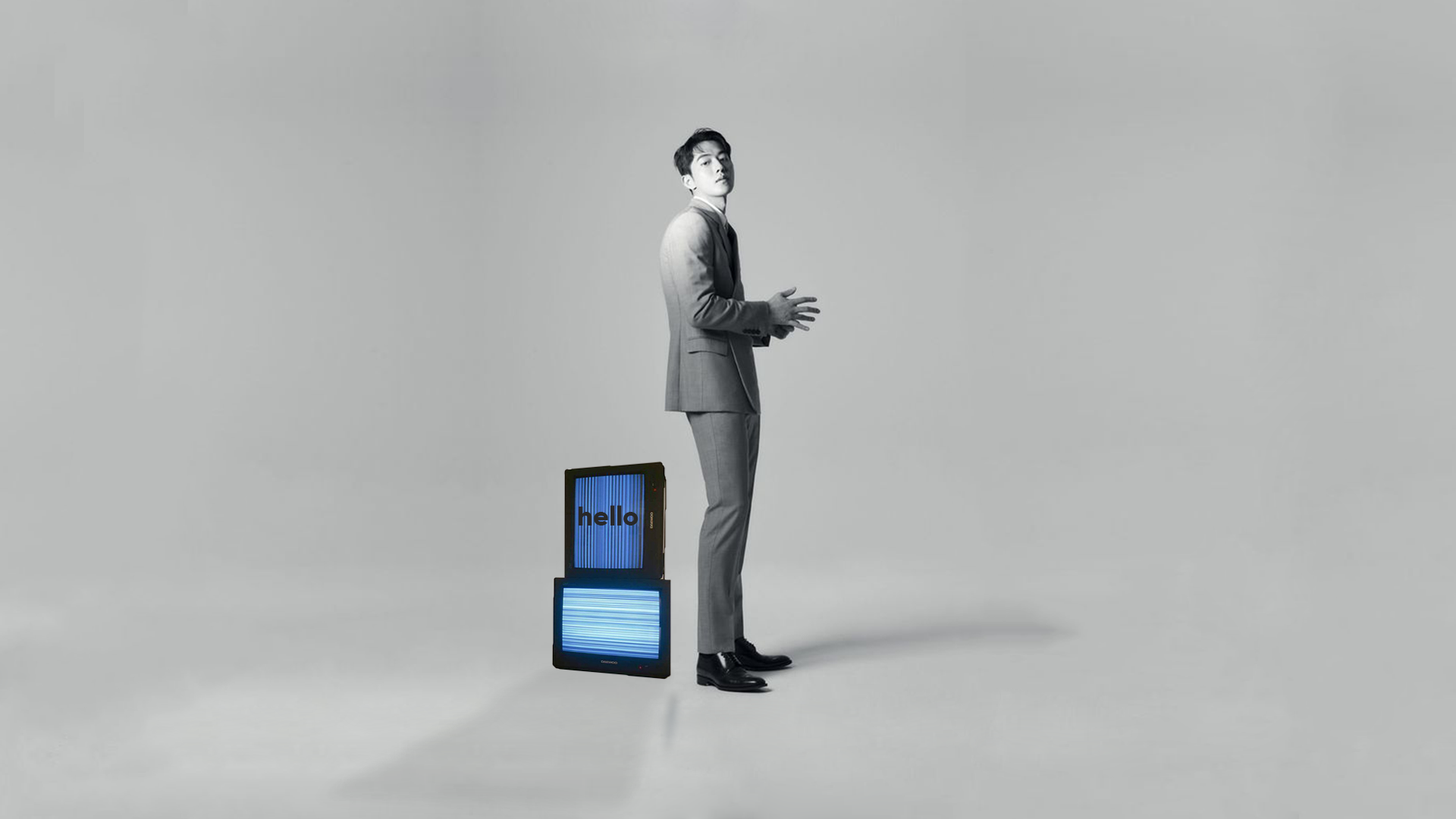
<style>
.page{position:relative;width:1456px;height:819px;background:#babcbb}
.page>*{position:absolute;margin:0}
.t1{font:27.1px "Gilroy-ExtraBold";color:#282829}
</style>
<div class="page">
<p class="t1" style="left:579px;top:505px;width:60px;height:21px">hello</p>
</div>
